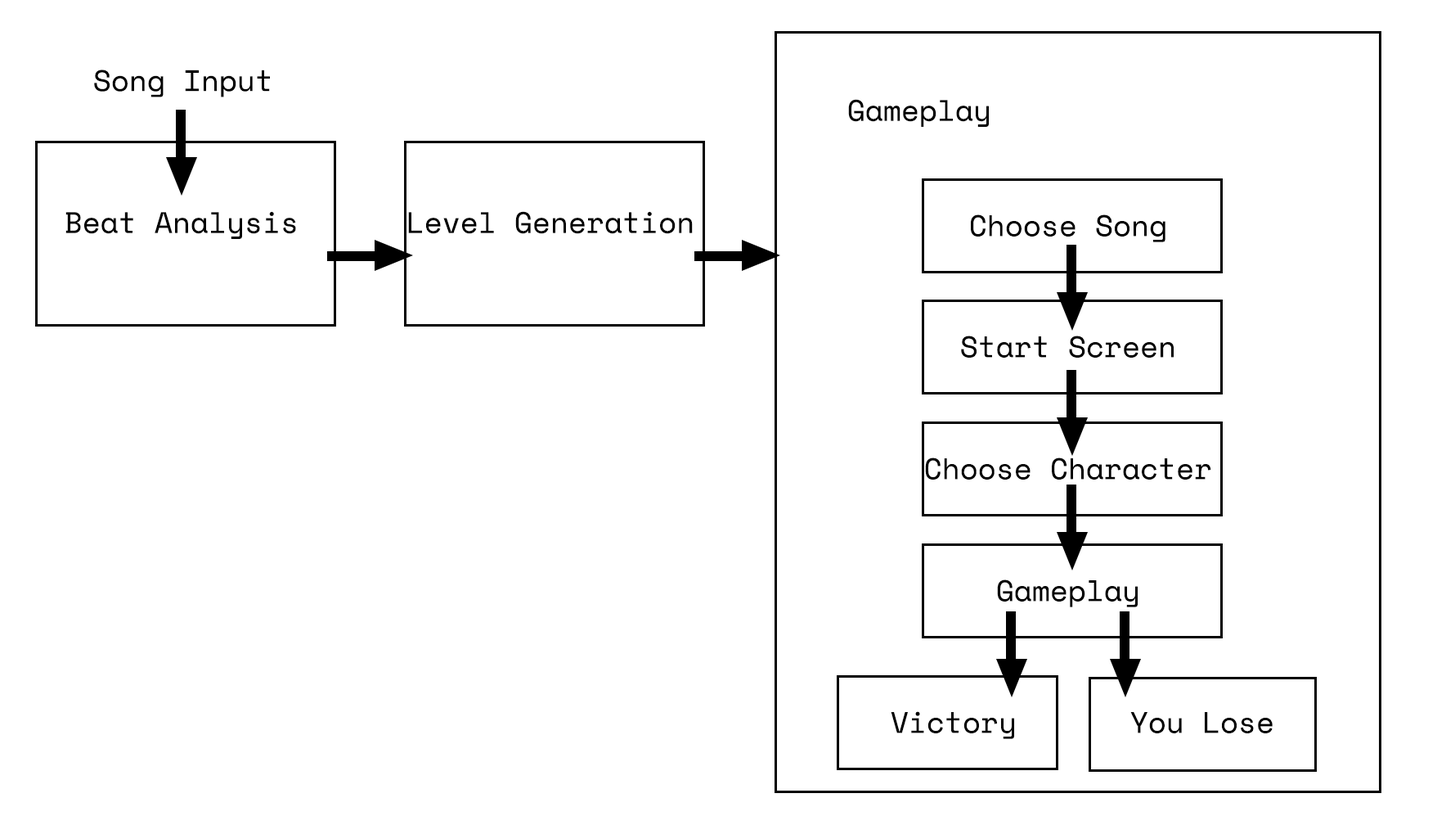
<style>
.page{position:relative;width:1446px;height:825px;background:#ffffff}
.page>*{position:absolute;margin:0}
.t1{font:29.4px "SpaceMono-Regular";color:#000000}
</style>
<div class="page">
<p class="t1" style="left:94px;top:70px;width:176px;height:27px">Song Input</p>
<p class="t1" style="left:848px;top:99px;width:141px;height:28px">Gameplay</p>
<p class="t1" style="left:65px;top:211px;width:231px;height:28px">Beat Analysis</p>
<p class="t1" style="left:408px;top:211px;width:285px;height:23px">Level Generation</p>
<p class="t1" style="left:971px;top:214px;width:195px;height:28px">Choose Song</p>
<p class="t1" style="left:961px;top:335px;width:213px;height:22px">Start Screen</p>
<p class="t1" style="left:925px;top:457px;width:286px;height:22px">Choose Character</p>
<p class="t1" style="left:997px;top:579px;width:141px;height:28px">Gameplay</p>
<p class="t1" style="left:891px;top:711px;width:123px;height:28px">Victory</p>
<p class="t1" style="left:1130px;top:712px;width:143px;height:21px">You Lose</p>
</div>
